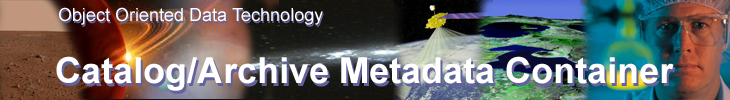
<style>
.page{position:relative;width:730px;height:100px}
.page>*{position:absolute;margin:0}
.t1{font:18px "ArialMT";color:#ffffff}
.t2{font:18px "ArialMT"}
.t3{font:36px "Arial-BoldMT";color:#ffffff}
.t4{font:36px "Arial-BoldMT"}
</style>
<div class="page">
<p class="t1" style="left:59px;top:7px;width:264px;height:18px">Object Oriented Data Technology</p>
<p class="t2" style="left:60px;top:9px;width:264px;height:18px">Object Oriented Data Technology</p>
<p class="t3" style="left:56px;top:56px;width:618px;height:35px">Catalog/Archive Metadata Container</p>
<p class="t4" style="left:58px;top:59px;width:618px;height:35px">Catalog/Archive Metadata Container</p>
</div>
